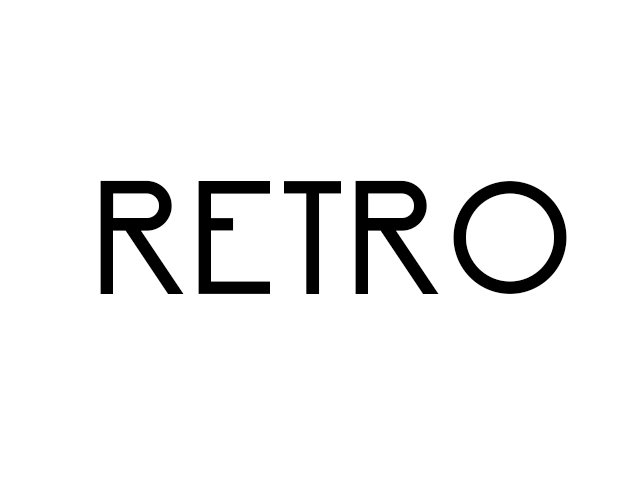
<style>
.page{position:relative;width:640px;height:480px;background:#ffffff}
.page>*{position:absolute;margin:0}
.t1{font:180px "surrounding-reg";color:#000000}
</style>
<div class="page">
<p class="t1" style="left:100px;top:180px;width:467px;height:114px">RETRO</p>
</div>
